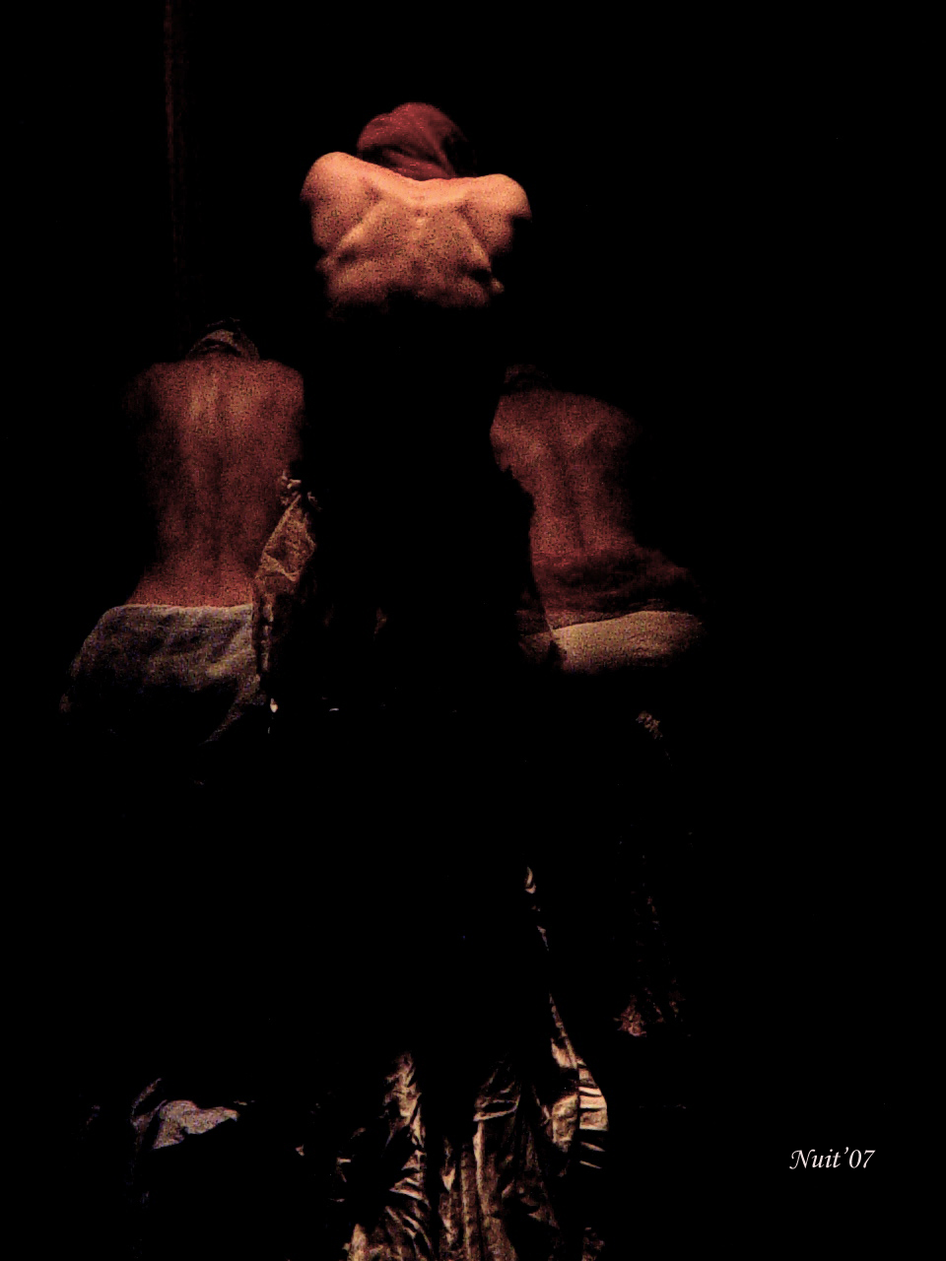
<style>
.page{position:relative;width:946px;height:1261px;background:#000000}
.page>*{position:absolute;margin:0}
.t1{font:29.6px "MonotypeCorsiva";color:#efdfdf}
</style>
<div class="page">
<p class="t1" style="left:789px;top:1147px;width:87px;height:22px">Nuit’07</p>
</div>
